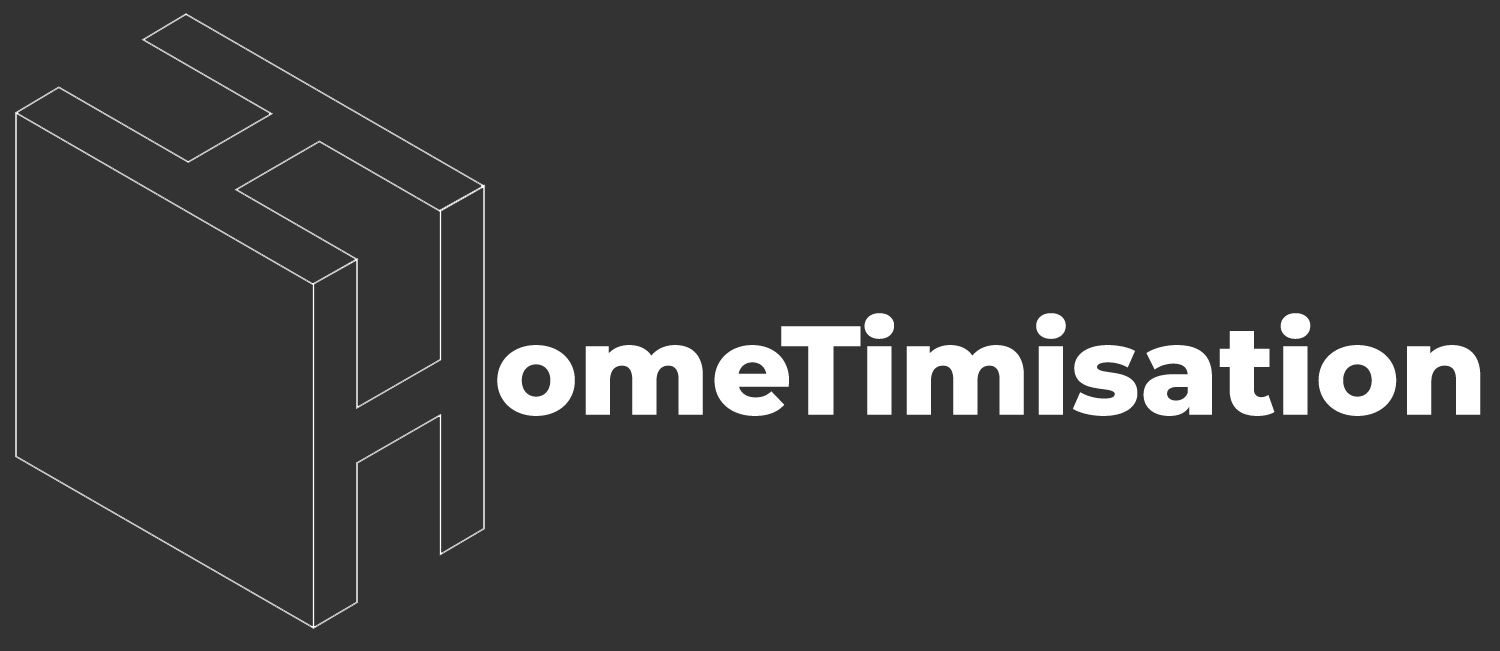
<style>
.page{position:relative;width:1500px;height:651px;background:#333333}
.page>*{position:absolute;margin:0}
.t1{font:126.2px "Montserrat-ExtraBold";color:#ffffff}
</style>
<div class="page">
<p class="t1" style="left:497px;top:313px;width:984px;height:103px">omeTimisation</p>
</div>
